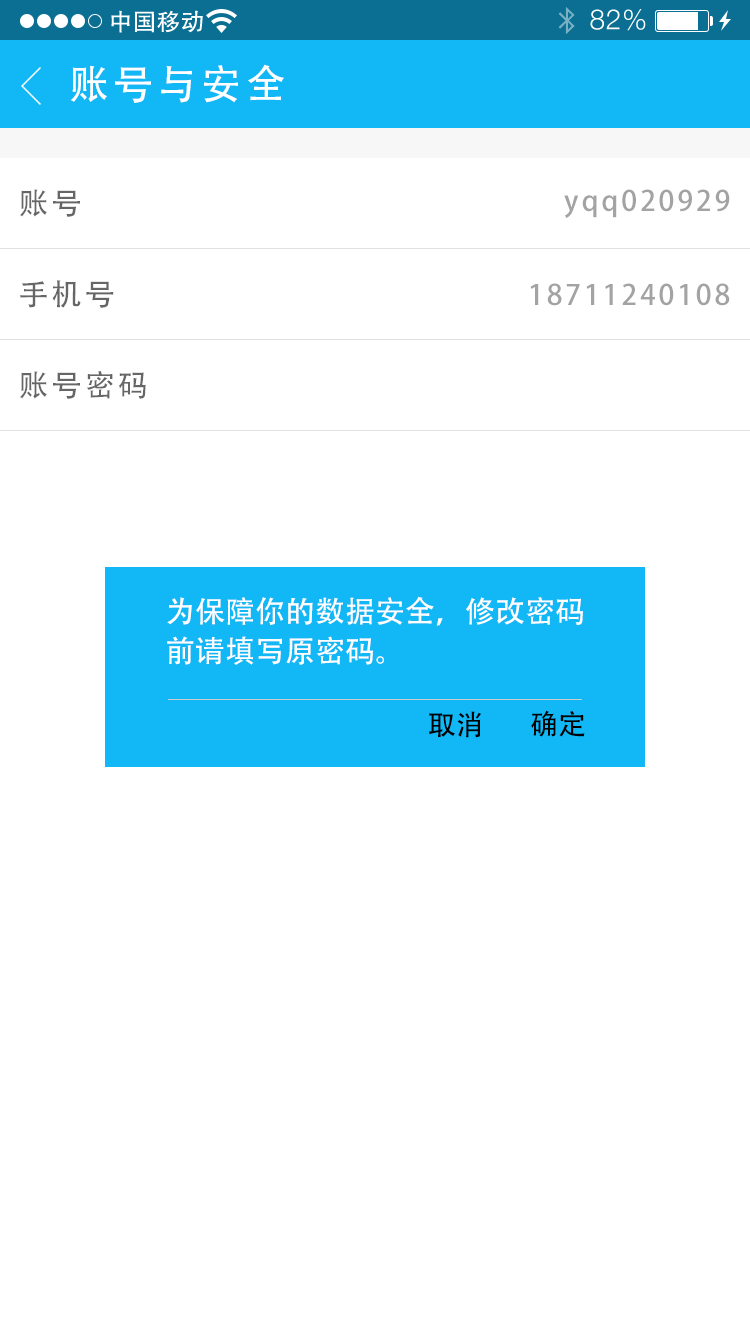
<style>
.page{position:relative;width:750px;height:1334px;background:#ffffff}
.page>*{position:absolute;margin:0}
.t1{font:40px "AdobeHeitiStd-Regular";letter-spacing:0.104em;color:#ffffff}
.t2{font:30px "AdobeHeitiStd-Regular";letter-spacing:0.104em;color:#666666}
.t3{font:28px "AdobeHeitiStd-Regular";letter-spacing:0.104em;color:#a3a3a3}
.t4{font:30px/14px "AdobeHeitiStd-Regular";color:#ffffff}
.t5{font:28px "AdobeHeitiStd-Regular";color:#000000}
</style>
<div class="page">
<p class="t1" style="left:70px;top:64px;width:214px;height:39px">账号与安全</p>
<p class="t2" style="left:19px;top:189px;width:61px;height:28px">账号</p>
<p class="t3" style="left:564px;top:189px;width:166px;height:29px">yqq020929</p>
<p class="t2" style="left:20px;top:280px;width:94px;height:28px">手机号</p>
<p class="t3" style="left:530px;top:283px;width:200px;height:23px">18711240108</p>
<p class="t2" style="left:19px;top:371px;width:127px;height:28px">账号密码</p>
<p class="t4" style="left:167px;top:596px;width:416px;height:69px">为保障你的数据安全，修改密码<br>前请填写原密码。</p>
<p class="t5" style="left:429px;top:711px;width:53px;height:27px">取消</p>
<p class="t5" style="left:531px;top:710px;width:54px;height:27px">确定</p>
</div>
